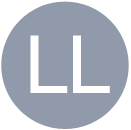
<style>
.page{position:relative;width:131px;height:130px;background:#909aab}
.page>*{position:absolute;margin:0}
.t1{font:80px "Helvetica";letter-spacing:-0.025em;color:#ffffff}
</style>
<div class="page">
<p class="t1" style="left:30px;top:35px;width:80px;height:58px">LL</p>
</div>
